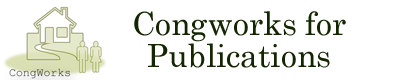
<style>
.page{position:relative;width:400px;height:80px;background:#ffffff}
.page>*{position:absolute;margin:0}
.t1{font:32px/32px "Century";color:#132600}
</style>
<div class="page">
<p class="t1" style="left:134px;top:11px;width:212px;height:57px;text-align:center">Congworks for<br>Publications</p>
</div>
